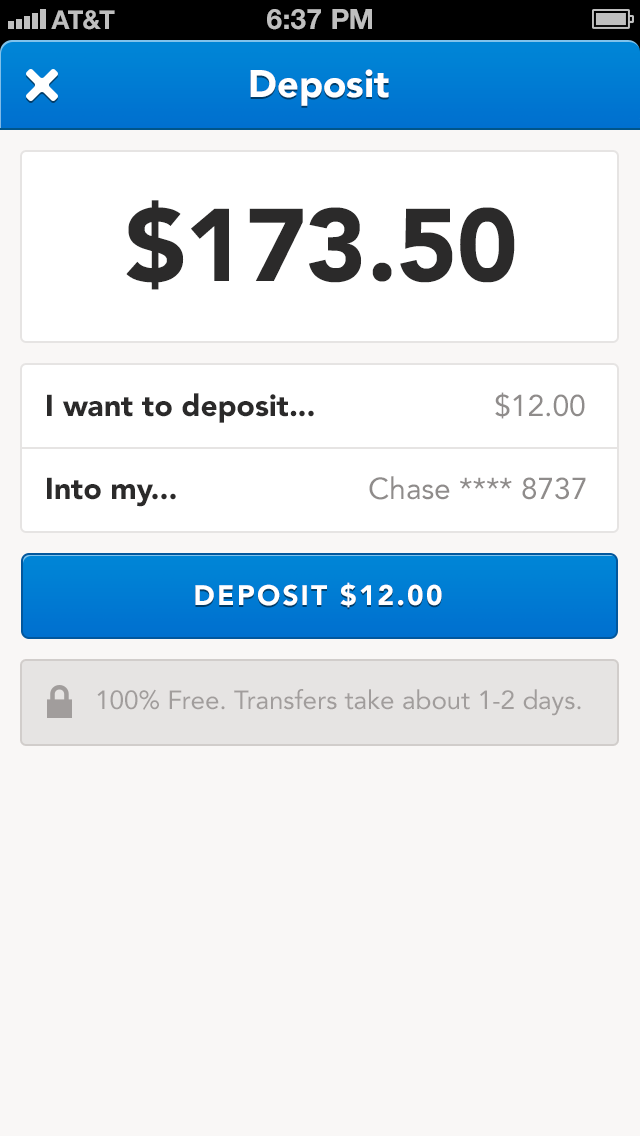
<style>
.page{position:relative;width:640px;height:1136px;background:#f9f7f6}
.page>*{position:absolute;margin:0}
.t1{font:38px "Avenir-Black";color:#ffffff}
.t2{font:102px "Avenir-Black";color:#2b2a2a}
.t3{font:30px "Avenir-Black";color:#2b2a2a}
.t4{font:30px "Avenir-Roman";color:#8f8c8b}
.t5{font:28px "Avenir-Black";letter-spacing:0.08em;color:#ffffff;text-transform:uppercase}
.t6{font:26px "Avenir-Roman";color:#a19d9c}
</style>
<div class="page">
<p class="t1" style="left:250px;top:69px;width:139px;height:37px">Deposit</p>
<p class="t2" style="left:126px;top:200px;width:389px;height:90px">$173.50</p>
<p class="t3" style="left:47px;top:393px;width:267px;height:30px">I want to deposit...</p>
<p class="t4" style="left:495px;top:392px;width:90px;height:27px">$12.00</p>
<p class="t3" style="left:47px;top:477px;width:129px;height:30px">Into my...</p>
<p class="t4" style="left:369px;top:476px;width:217px;height:24px">Chase **** 8737</p>
<p class="t5" style="left:195px;top:582px;width:247px;height:26px">Deposit $12.00</p>
<p class="t6" style="left:97px;top:689px;width:484px;height:27px">100% Free. Transfers take about 1-2 days.</p>
</div>
